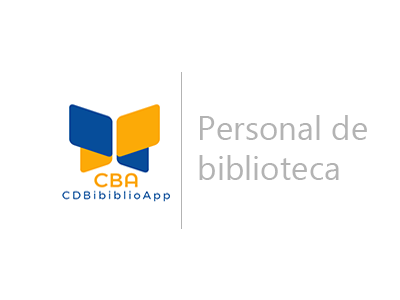
<style>
.page{position:relative;width:400px;height:300px;background:#ffffff}
.page>*{position:absolute;margin:0}
.t1{font:33.3px "MicrosoftTaiLe";color:#b3b3b3}
</style>
<div class="page">
<p class="t1" style="left:199px;top:115px;width:168px;height:65px">Personal de <br>biblioteca</p>
</div>
